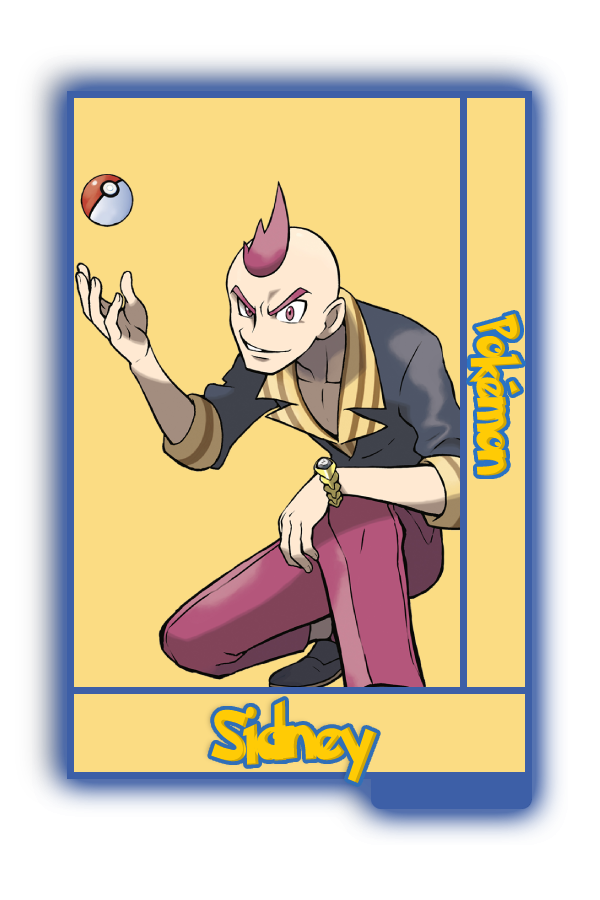
<style>
.page{position:relative;width:600px;height:900px;background:#fbdc83}
.page>*{position:absolute;margin:0}
.t1{font:48.8px "PokemonSolidNormal";color:#ffcb05;scale:0.8 1}
.t2{font:56.6px "PokemonSolidNormal";color:#ffcb05;scale:0.92 1}
</style>
<div class="page">
<p class="t1" style="left:469px;top:313px;width:54px;height:163px;rotate:90deg">Pokémon</p>
<p class="t2" style="left:211px;top:699px;width:166px;height:84px">Sidney</p>
</div>
